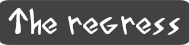
<style>
.page{position:relative;width:189px;height:45px;background:#424242}
.page>*{position:absolute;margin:0}
.t1{font:32.5px "AcadianRunes-Regular";color:#ffffff}
</style>
<div class="page">
<p class="t1" style="left:8px;top:8px;width:172px;height:27px">The regress</p>
</div>
